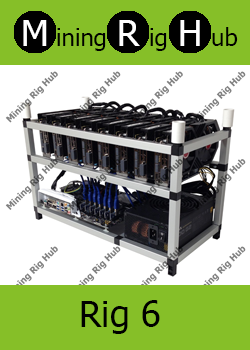
<style>
.page{position:relative;width:250px;height:350px;background:#86bf28}
.page>*{position:absolute;margin:0}
.t1{font:36px "Tahoma";color:#ffffff}
.t2{font:24px "Tahoma";color:#000000}
.t3{font:36px "Tahoma";color:#000000}
</style>
<div class="page">
<p class="t1" style="left:23px;top:20px;width:24px;height:26px">M</p>
<p class="t2" style="left:57px;top:28px;width:49px;height:23px">ining</p>
<p class="t1" style="left:119px;top:20px;width:21px;height:26px">R</p>
<p class="t2" style="left:150px;top:28px;width:17px;height:23px">ig</p>
<p class="t1" style="left:180px;top:20px;width:20px;height:26px">H</p>
<p class="t2" style="left:212px;top:27px;width:26px;height:19px">ub</p>
<p class="t3" style="left:81px;top:300px;width:79px;height:34px">Rig 6</p>
</div>
